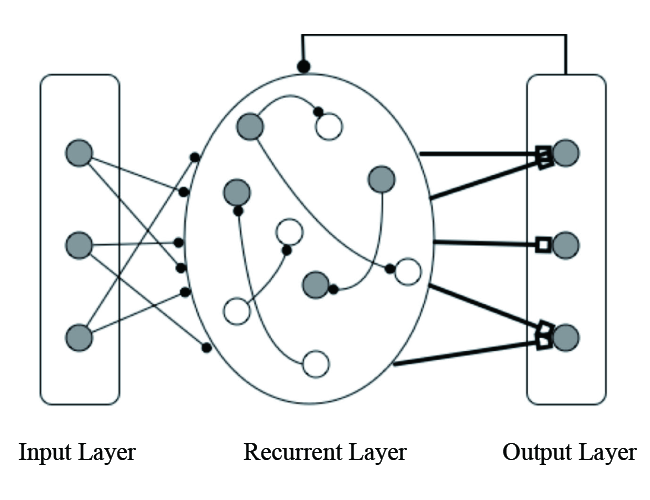
<style>
.page{position:relative;width:650px;height:500px;background:#ffffff}
.page>*{position:absolute;margin:0}
.t1{font:25px "TimesNewRomanPSMT";color:#040606}
</style>
<div class="page">
<p class="t1" style="left:18px;top:443px;width:118px;height:22px">Input Layer</p>
<p class="t1" style="left:243px;top:443px;width:164px;height:22px">Recurrent Layer</p>
<p class="t1" style="left:503px;top:443px;width:134px;height:22px">Output Layer</p>
</div>
